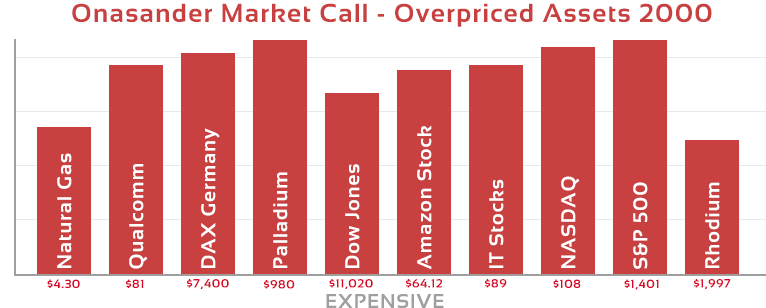
<style>
.page{position:relative;width:766px;height:308px;background:#c84040}
.page>*{position:absolute;margin:0}
.t1{font:26px "Sansation-Bold";letter-spacing:0.05em;color:#c84040}
.t2{font:20px "Sansation-Bold";letter-spacing:0.05em;color:#ffffff}
.t3{font:12px "Sansation-Bold";letter-spacing:0.05em;color:#d7082a}
.t4{font:20px "Sansation-Bold";letter-spacing:0.05em;color:#9f9fa0}
</style>
<div class="page">
<p class="t1" style="left:72px;top:3px;width:640px;height:24px">Onasander Market Call - Overpriced Assets 2000</p>
<p class="t2" style="left:417px;top:125px;width:15px;height:145px;rotate:-90deg">Amazon Stock</p>
<p class="t2" style="left:201px;top:128px;width:19px;height:140px;rotate:-90deg">DAX Germany</p>
<p class="t2" style="left:57px;top:153px;width:15px;height:115px;rotate:-90deg">Natural Gas</p>
<p class="t2" style="left:129px;top:164px;width:19px;height:105px;rotate:-90deg">Qualcomm</p>
<p class="t2" style="left:273px;top:172px;width:15px;height:96px;rotate:-90deg">Palladium</p>
<p class="t2" style="left:345px;top:164px;width:15px;height:104px;rotate:-90deg">Dow Jones</p>
<p class="t2" style="left:489px;top:179px;width:15px;height:89px;rotate:-90deg">IT Stocks</p>
<p class="t2" style="left:561px;top:176px;width:19px;height:92px;rotate:-90deg">NASDAQ</p>
<p class="t2" style="left:633px;top:182px;width:15px;height:87px;rotate:-90deg">S&amp;P 500</p>
<p class="t2" style="left:705px;top:182px;width:15px;height:86px;rotate:-90deg">Rhodium</p>
<p class="t3" style="left:47px;top:279px;width:33px;height:9px">$4.30</p>
<p class="t3" style="left:126px;top:279px;width:18px;height:9px">$81</p>
<p class="t3" style="left:187px;top:279px;width:42px;height:10px">$7,400</p>
<p class="t3" style="left:264px;top:280px;width:31px;height:9px">$980</p>
<p class="t3" style="left:329px;top:279px;width:44px;height:10px">$11,020</p>
<p class="t3" style="left:406px;top:279px;width:36px;height:9px">$64.12</p>
<p class="t3" style="left:485px;top:279px;width:22px;height:9px">$89</p>
<p class="t3" style="left:553px;top:279px;width:28px;height:9px">$108</p>
<p class="t3" style="left:624px;top:279px;width:35px;height:11px">$1,401</p>
<p class="t3" style="left:694px;top:279px;width:37px;height:10px">$1,997</p>
<p class="t4" style="left:326px;top:294px;width:118px;height:14px">EXPENSIVE</p>
</div>
